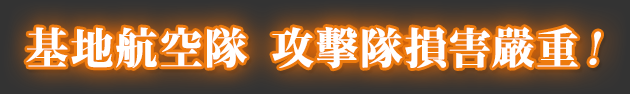
<style>
.page{position:relative;width:630px;height:94px}
.page>*{position:absolute;margin:0}
.t1{font:43px "KochoStd-Heavy";letter-spacing:0.005em;color:#ffffff;font-weight:bold}
.t2{font:43px "RyuminPro-Heavy";letter-spacing:0.005em;color:#ffffff;font-weight:bold}
.t3{font:43px "KochoStd-Heavy";letter-spacing:0.005em;color:#ffffff;font-weight:bold;font-style:italic}
</style>
<div class="page">
<p class="t1" style="left:26px;top:27px;width:575px;height:42px">基地航空隊 攻<span class="t2">擊</span>隊損害嚴重<span class="t3">！</span></p>
</div>
